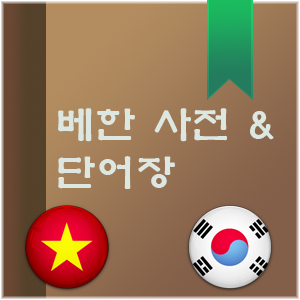
<style>
.page{position:relative;width:300px;height:300px}
.page>*{position:absolute;margin:0}
.t1{font:40px "YetR-HM";color:#dce7e1}
</style>
<div class="page">
<p class="t1" style="left:58px;top:108px;width:216px;height:81px">베한 사전 &amp; <br>단어장</p>
</div>
